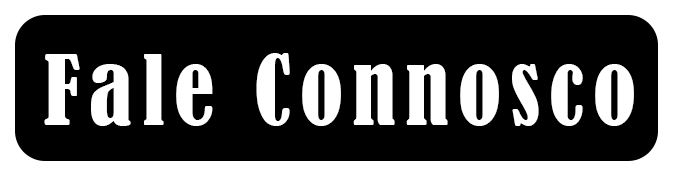
<style>
.page{position:relative;width:673px;height:176px;background:#000000}
.page>*{position:absolute;margin:0}
.t1{font:90px "BernardMT-Condensed";letter-spacing:0.1em;color:#ffffff}
</style>
<div class="page">
<p class="t1" style="left:44px;top:53px;width:590px;height:73px">Fale Connosco</p>
</div>
